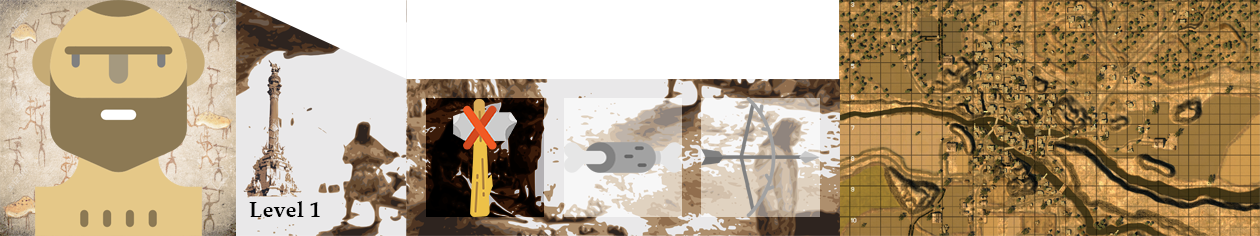
<style>
.page{position:relative;width:1260px;height:236px}
.page>*{position:absolute;margin:0}
.t1{font:22.2px "PalatinoLinotype-Bold";color:#000000}
</style>
<div class="page">
<p class="t1" style="left:249px;top:201px;width:71px;height:16px">Level 1</p>
</div>
